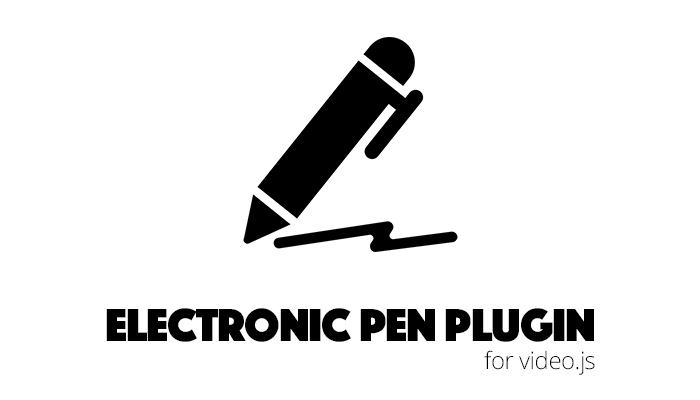
<style>
.page{position:relative;width:700px;height:400px;background:#ffffff}
.page>*{position:absolute;margin:0}
.t1{font:48px "Phosphate-Solid";letter-spacing:-0.02em;color:#000000}
.t2{font:24px "OpenSans-Light";letter-spacing:-0.02em;color:#000000}
</style>
<div class="page">
<p class="t1" style="left:106px;top:308px;width:488px;height:34px">Electronic pen plugin</p>
<p class="t2" style="left:484px;top:350px;width:111px;height:25px">for video.js</p>
</div>
